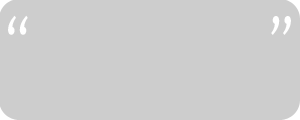
<style>
.page{position:relative;width:300px;height:120px;background:#cdcdcd}
.page>*{position:absolute;margin:0}
.t1{font:60px "Candara";color:#ffffff;scale:0.8 1}
</style>
<div class="page">
<p class="t1" style="left:8px;top:15px;width:20px;height:20px">“</p>
<p class="t1" style="left:271px;top:16px;width:20px;height:19px">”</p>
</div>
